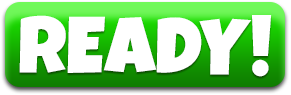
<style>
.page{position:relative;width:291px;height:95px;background:#ffffff}
.page>*{position:absolute;margin:0}
.t1{font:80px "LuckiestGuy-Regular";color:#ffffff;text-transform:uppercase}
</style>
<div class="page">
<p class="t1" style="left:19px;top:15px;width:253px;height:62px">ready!</p>
</div>
